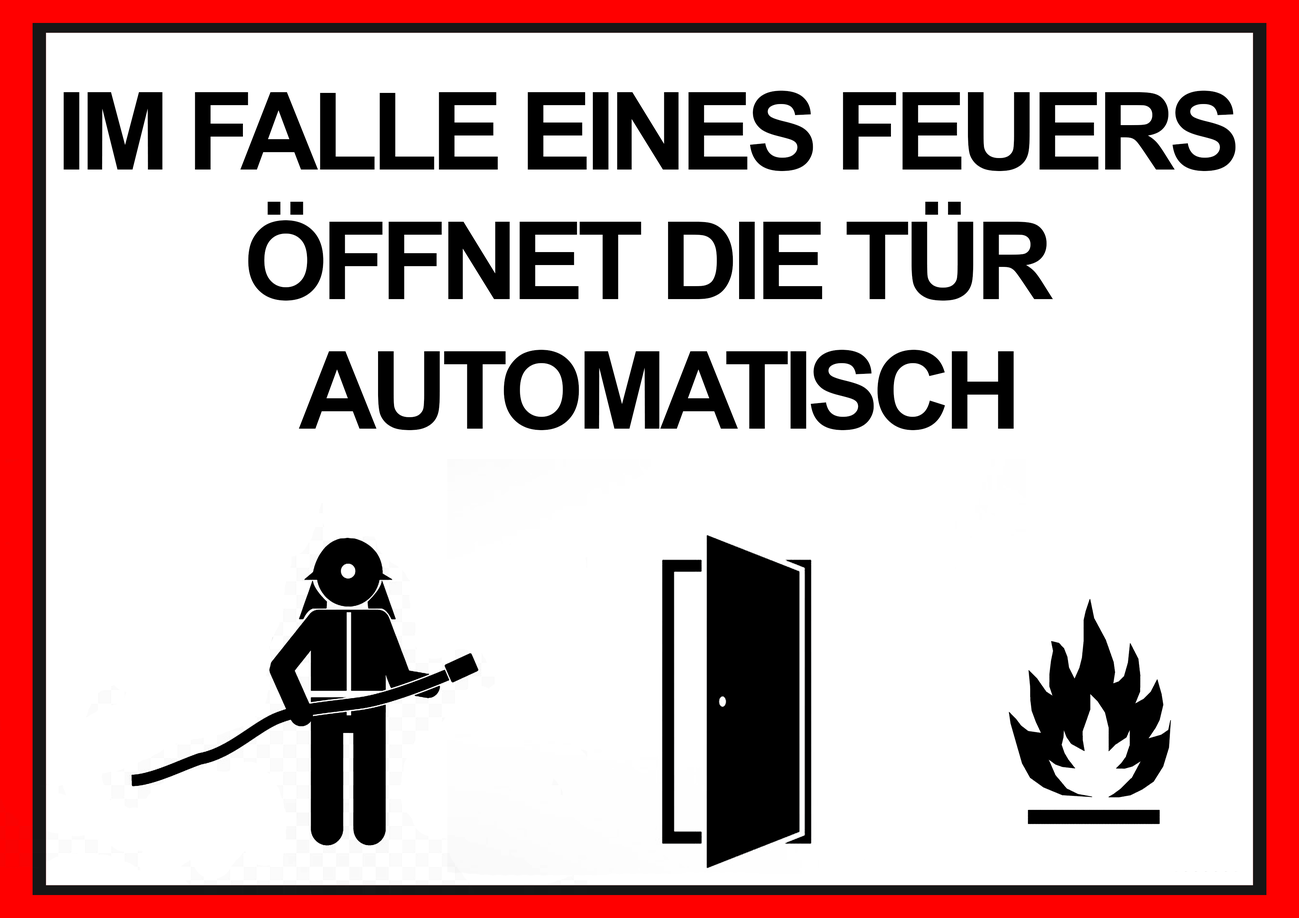
<style>
.page{position:relative;width:1299px;height:918px;background:#ffffff}
.page>*{position:absolute;margin:0}
.t1{font:108px "Arial-BoldMT";letter-spacing:-0.06em;color:#000000;text-transform:uppercase}
</style>
<div class="page">
<p class="t1" style="left:63px;top:91px;width:1172px;height:339px;text-align:center">Im Falle eines Feuers <br>öffnet die Tür <br>automatisch</p>
</div>
